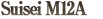
<style>
.page{position:relative;width:103px;height:19px;background:#ffffff}
.page>*{position:absolute;margin:0}
.t1{font:18px "RyuminPro-ExBold";letter-spacing:-0.08em;color:#4a3f32;font-weight:bold;scale:0.9 1}
</style>
<div class="page">
<p class="t1" style="left:1px;top:1px;width:86px;height:15px">Suisei M12A</p>
</div>
